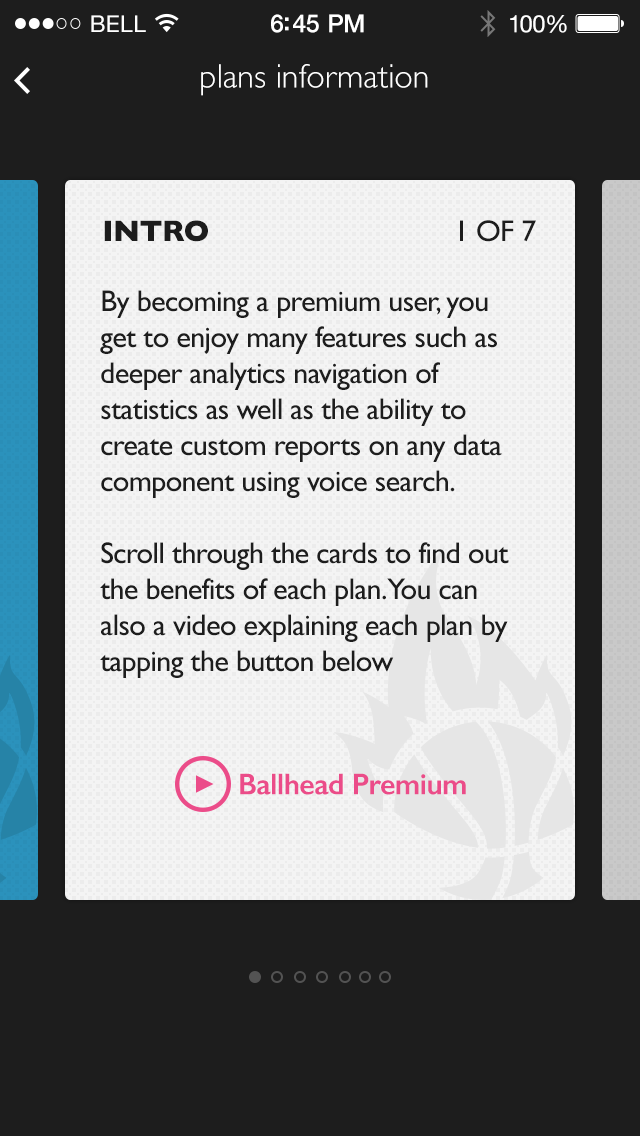
<style>
.page{position:relative;width:640px;height:1136px;background:#1d1d1d}
.page>*{position:absolute;margin:0}
.t1{font:23px "HelveticaNeue";letter-spacing:0.02em;color:#ffffff}
.t2{font:25px "HelveticaNeue-Medium";letter-spacing:-0.02em;color:#ffffff}
.t3{font:24px "HelveticaNeue";letter-spacing:-0.02em;color:#ffffff}
.t4{font:34px "GillSans-Light";color:#ffffff}
.t5{font:30px "GillSans-Bold";letter-spacing:-0.02em;color:#1d1d1d}
.t6{font:30px "GillSans";letter-spacing:-0.02em;color:#1d1d1d}
.t7{font:30px "GillSans-SemiBold";letter-spacing:-0.02em;color:#eb4c89}
</style>
<div class="page">
<p class="t1" style="left:91px;top:15px;width:55px;height:17px">BELL</p>
<p class="t2" style="left:271px;top:14px;width:93px;height:19px">6:45 PM</p>
<p class="t3" style="left:510px;top:15px;width:57px;height:18px">100%</p>
<p class="t4" style="left:201px;top:64px;width:227px;height:32px">plans information</p>
<p class="t5" style="left:104px;top:220px;width:104px;height:22px">INTRO</p>
<p class="t6" style="left:460px;top:220px;width:76px;height:22px">1 OF 7</p>
<p class="t6" style="left:100px;top:290px;width:409px;height:388px">By becoming a premium user, you get to enjoy many features such as deeper analytics navigation of statistics as well as the ability to create custom reports on any data component using voice search.<br><br>Scroll through the cards to find out the benefits of each plan. You can also a video explaining each plan by tapping the button below</p>
<p class="t7" style="left:240px;top:773px;width:226px;height:22px">Ballhead Premium</p>
</div>
